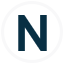
<style>
.page{position:relative;width:64px;height:64px;background:#ffffff}
.page>*{position:absolute;margin:0}
.t1{font:50px "CenturyGothic-Bold";color:#082f43}
</style>
<div class="page">
<p class="t1" style="left:18px;top:15px;width:29px;height:36px">N</p>
</div>
